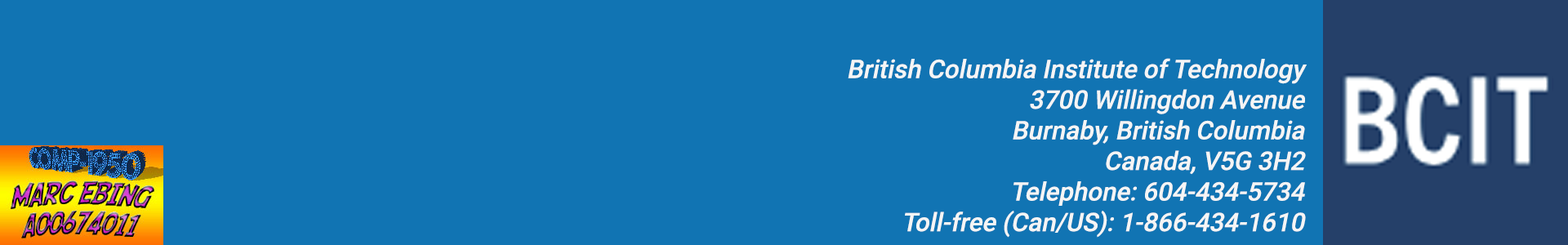
<style>
.page{position:relative;width:1568px;height:245px;background:#1174b3}
.page>*{position:absolute;margin:0}
.t1{font:25.5px "Roboto-Medium";color:#f6f6f6;font-style:italic}
</style>
<div class="page">
<p class="t1" style="left:848px;top:58px;width:459px;height:180px;text-align:right">British Columbia Institute of Technology<br>3700 Willingdon Avenue<br>Burnaby, British Columbia<br>Canada, V5G 3H2<br>Telephone: 604-434-5734<br>Toll-free (Can/US): 1-866-434-1610</p>
</div>
